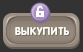
<style>
.page{position:relative;width:83px;height:52px;background:#333333}
.page>*{position:absolute;margin:0}
.t1{font:10px "RotondaC-Bold";letter-spacing:0.06em;color:#fbfdf5;text-transform:uppercase}
</style>
<div class="page">
<p class="t1" style="left:15px;top:27px;width:54px;height:8px">выкупить</p>
</div>
